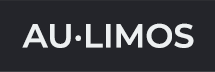
<style>
.page{position:relative;width:215px;height:72px;background:#24252a}
.page>*{position:absolute;margin:0}
.t1{font:33.3px "Montserrat-SemiBold";color:#edf0f1}
</style>
<div class="page">
<p class="t1" style="left:22px;top:23px;width:172px;height:25px">AU·LIMOS</p>
</div>
